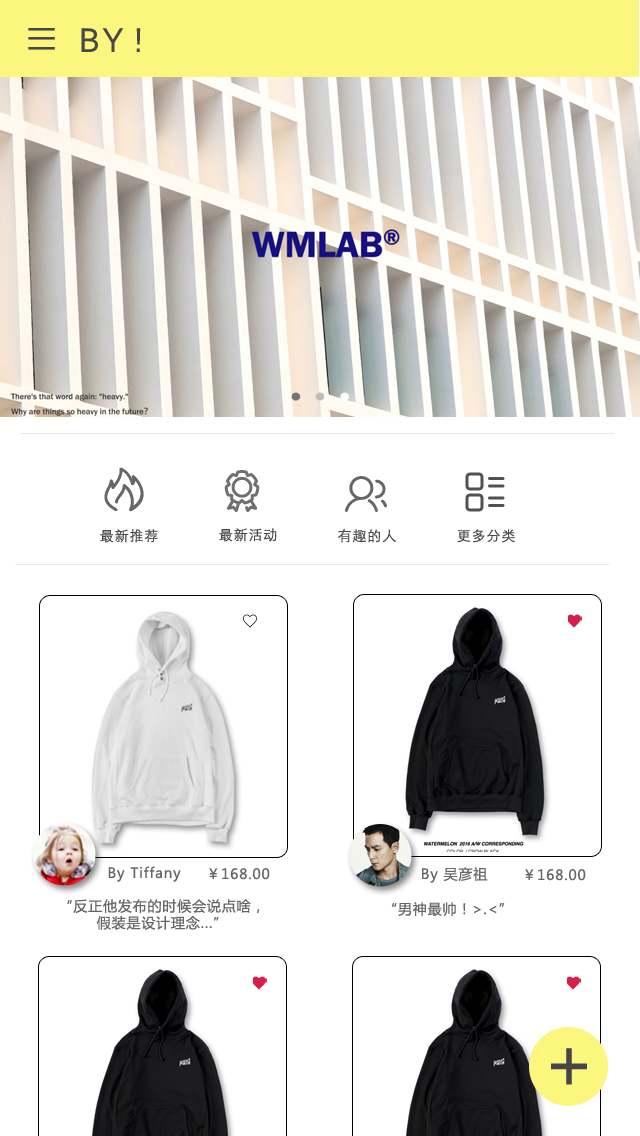
<style>
.page{position:relative;width:640px;height:1136px;background:#ffffff}
.page>*{position:absolute;margin:0}
.t1{font:36px "Corbel";letter-spacing:0.06em;color:#484848}
.t2{font:36px "Corbel";letter-spacing:0.02em;color:#484848}
.t3{font:14px "STXihei";letter-spacing:0.06em;color:#484848}
.t4{font:14px "MicrosoftYaHei";letter-spacing:0.06em;color:#676767}
.t5{font:72px "MicrosoftYaHei";letter-spacing:0.06em;color:#464646}
</style>
<div class="page">
<p class="t1" style="left:81px;top:28px;width:60px;height:24px">BY<span class="t2"> !</span></p>
<p class="t3" style="left:100px;top:529px;width:58px;height:14px">最新推荐</p>
<p class="t3" style="left:219px;top:528px;width:58px;height:14px">最新活动</p>
<p class="t3" style="left:338px;top:529px;width:58px;height:14px">有趣的人</p>
<p class="t3" style="left:457px;top:529px;width:58px;height:14px">更多分类</p>
<p class="t4" style="left:108px;top:866px;width:73px;height:16px">By Tiffany</p>
<p class="t4" style="left:209px;top:868px;width:61px;height:12px">￥168.00</p>
<p class="t4" style="left:422px;top:867px;width:66px;height:16px">By 吴彦祖</p>
<p class="t4" style="left:525px;top:869px;width:61px;height:12px">￥168.00</p>
<p class="t4" style="left:67px;top:899px;width:193px;height:31px;text-align:center">“反正他发布的时候会说点啥，<br>假装是设计理念...”</p>
<p class="t4" style="left:391px;top:902px;width:114px;height:14px">“男神最帅！&gt;.&lt;”</p>
<p class="t5" style="left:551px;top:1048px;width:36px;height:37px">+</p>
</div>
